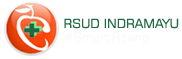
<style>
.page{position:relative;width:182px;height:59px;background:#ffffff}
.page>*{position:absolute;margin:0}
.t1{font:12.5px "Square721BT-Roman";color:#226b47}
</style>
<div class="page">
<p class="t1" style="left:64px;top:18px;width:115px;height:11px">RSUD INDRAMAYU</p>
</div>
